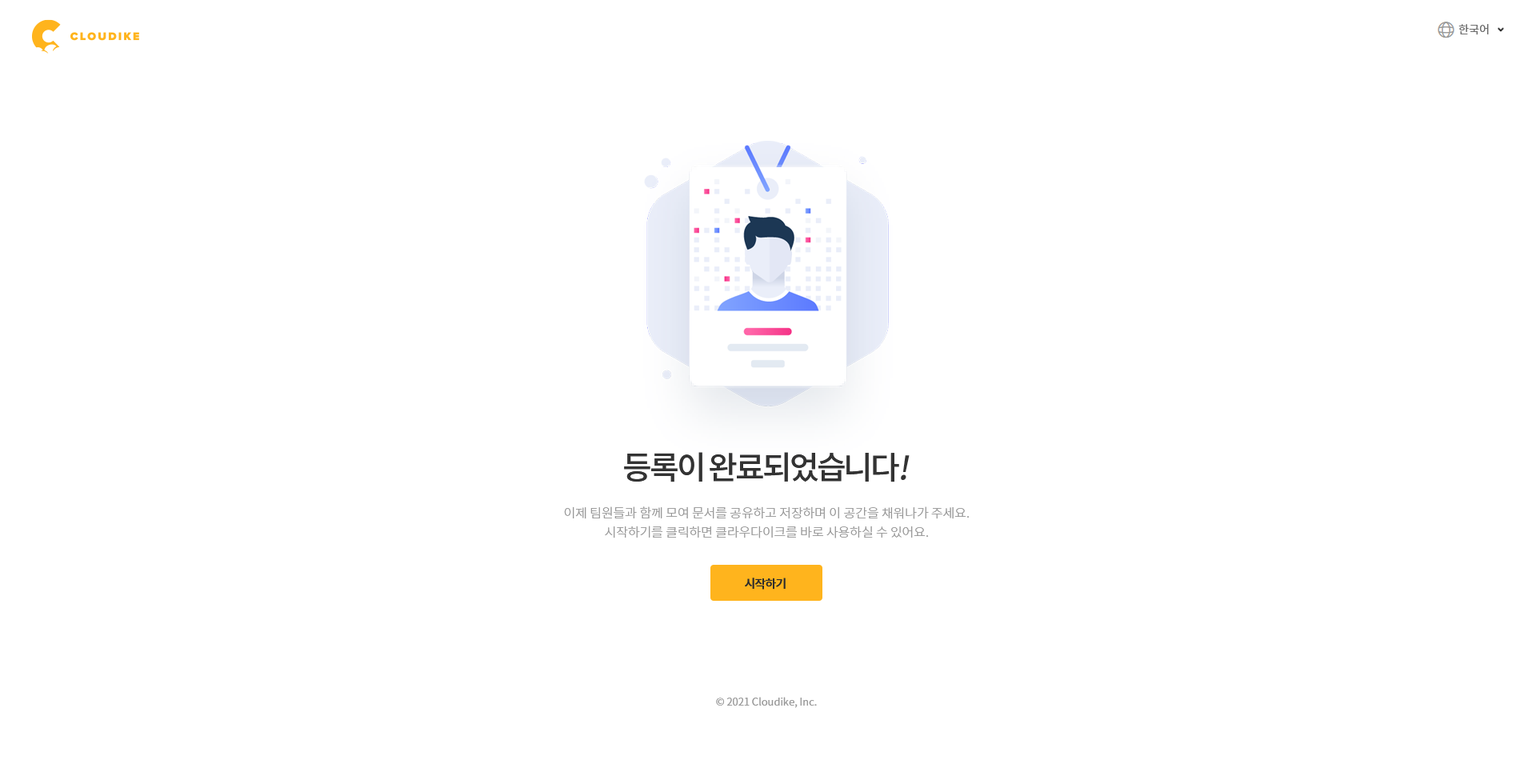
<style>
.page{position:relative;width:1536px;height:776px;background:#ffffff}
.page>*{position:absolute;margin:0}
.t1{font:11.2px "NotoSansCJKkr-DemiLight";color:#666666}
.t2{font:32px "NotoSansCJKkr-Medium";letter-spacing:-0.075em;color:#333333}
.t3{font:32px "NotoSansCJKkr-Medium";letter-spacing:-0.075em;color:#333333;font-style:italic}
.t4{font:12.8px/19.2px "NotoSansCJKkr-Light";letter-spacing:-0.005em;color:#999999}
.t5{font:12px "NotoSansCJKkr-Medium";letter-spacing:-0.05em;color:#2d2d2d}
.t6{font:10.4px "NotoSansCJKkr-DemiLight";color:#999999}
</style>
<div class="page">
<p class="t1" style="left:1459px;top:24px;width:30px;height:11px">한국어</p>
<p class="t2" style="left:624px;top:452px;width:286px;height:31px">등록이 완료되었습니다<span class="t3">!</span></p>
<p class="t4" style="left:564px;top:507px;width:406px;height:32px;text-align:center">이제 팀원들과 함께 모여 문서를 공유하고 저장하며 이 공간을 채워나가 주세요.<br>시작하기를 클릭하면 클라우다이크를 바로 사용하실 수 있어요.</p>
<p class="t5" style="left:745px;top:578px;width:41px;height:12px">시작하기</p>
<p class="t6" style="left:716px;top:697px;width:101px;height:11px">© 2021 Cloudike, Inc.</p>
</div>
